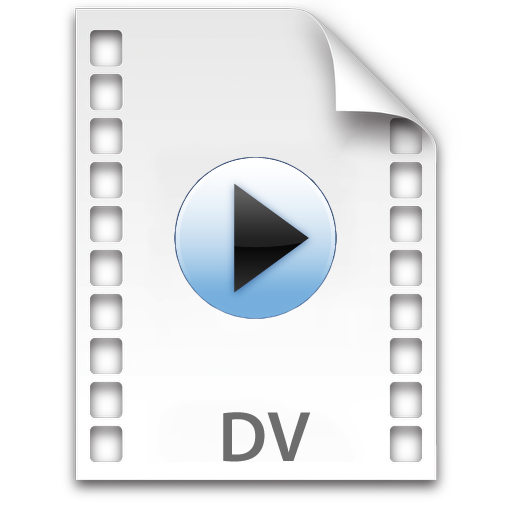
<style>
.page{position:relative;width:512px;height:512px;background:#ffffff}
.page>*{position:absolute;margin:0}
.t1{font:72px "MyriadPro-Semibold";color:#6e6d6d}
</style>
<div class="page">
<p class="t1" style="left:223px;top:412px;width:88px;height:50px">DV</p>
</div>
